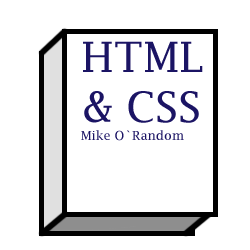
<style>
.page{position:relative;width:250px;height:250px;background:#ffffff}
.page>*{position:absolute;margin:0}
.t1{font:41.7px "LucidaFax";color:#1b1464}
.t2{font:12.5px "LucidaFax";color:#1b1464}
</style>
<div class="page">
<p class="t1" style="left:83px;top:41px;width:120px;height:82px;text-align:center">HTML &amp; CSS</p>
<p class="t2" style="left:81px;top:130px;width:103px;height:11px">Mike O`Random</p>
</div>
